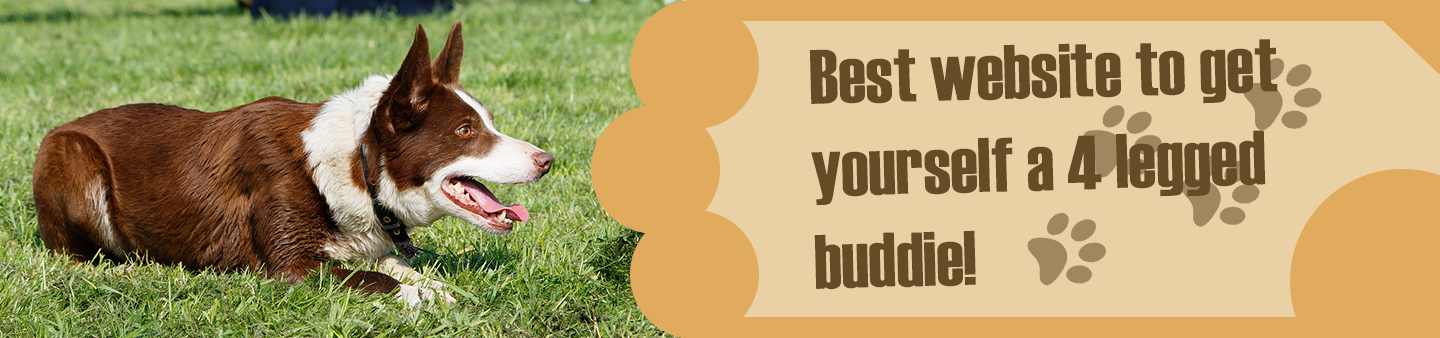
<style>
.page{position:relative;width:1440px;height:338px;background:#e9d1a5}
.page>*{position:absolute;margin:0}
.t1{font:77px "Haettenschweiler";color:#654c26}
</style>
<div class="page">
<p class="t1" style="left:809px;top:39px;width:469px;height:251px;rotate:-1deg">Best website to get <br>yourself a 4 legged <br>buddie!</p>
</div>
